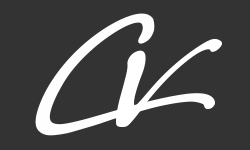
<style>
.page{position:relative;width:250px;height:150px;background:#333333}
.page>*{position:absolute;margin:0}
.t1{font:141.7px "The-Californication";letter-spacing:0.06em;color:#fefefe;font-weight:bold}
.t2{font:258.3px "The-Californication";letter-spacing:0.06em;color:#ffffff}
</style>
<div class="page">
<p class="t1" style="left:35px;top:13px;width:181px;height:123px">C</p>
<p class="t2" style="left:116px;top:38px;width:106px;height:89px">v</p>
</div>
